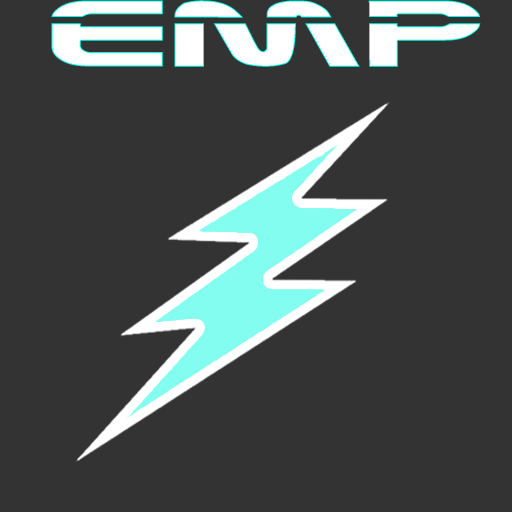
<style>
.page{position:relative;width:512px;height:512px;background:#333333}
.page>*{position:absolute;margin:0}
.t1{font:100px "Laserian";color:#ffffff}
</style>
<div class="page">
<p class="t1" style="left:51px;top:0px;width:430px;height:67px">EMP</p>
</div>
